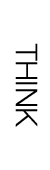
<style>
.page{position:relative;width:50px;height:170px;background:#ffffff}
.page>*{position:absolute;margin:0}
.t1{font:30px "HelveticaNeue-Light";letter-spacing:-0.02em;color:#000000}
</style>
<div class="page">
<p class="t1" style="left:15px;top:43px;width:23px;height:84px;rotate:90deg">THINK</p>
</div>
